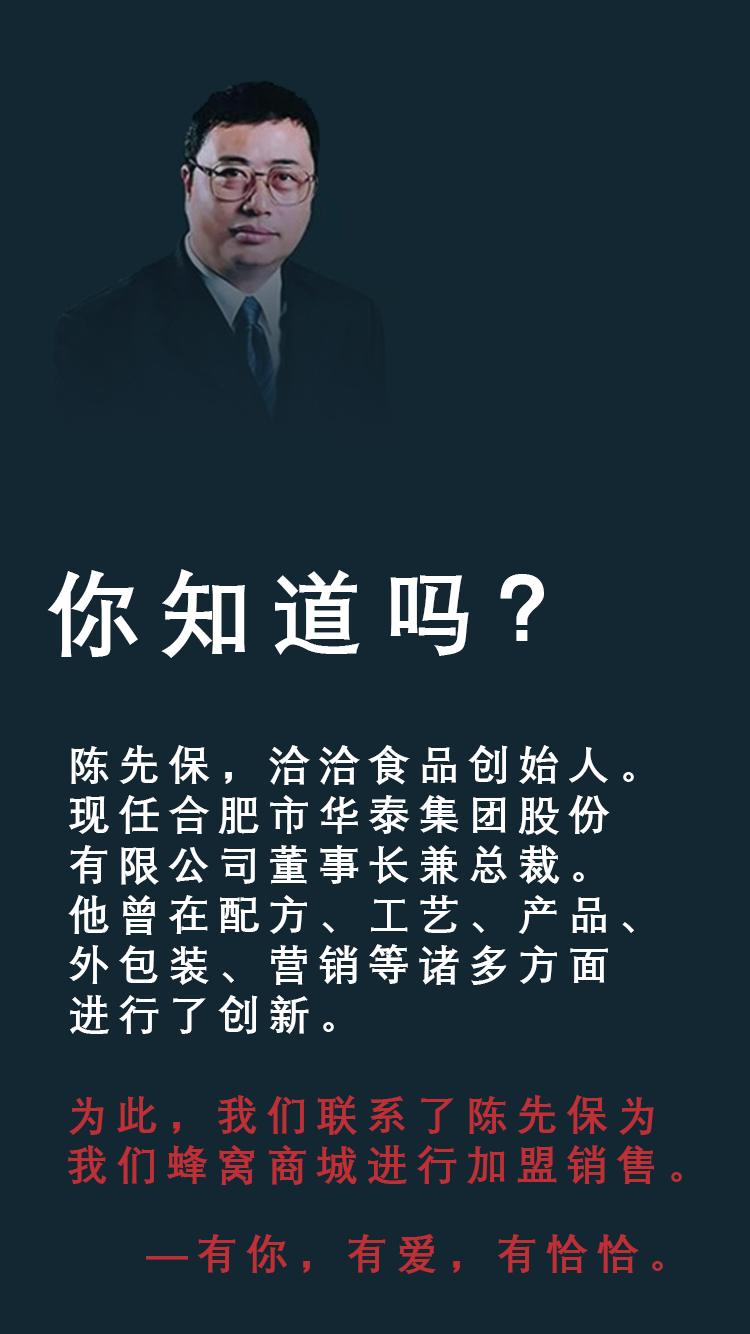
<style>
.page{position:relative;width:750px;height:1334px;background:#132732}
.page>*{position:absolute;margin:0}
.t1{font:93.2px "DengXian-Bold";letter-spacing:0.2em;color:#ffffff}
.t2{font:41.7px "DengXian-Bold";letter-spacing:0.2em;color:#ffffff}
.t3{font:41.7px "DengXian-Bold";letter-spacing:0.2em;color:#be3036}
</style>
<div class="page">
<p class="t1" style="left:47px;top:569px;width:497px;height:89px">你知道吗？</p>
<p class="t2" style="left:68px;top:745px;width:566px;height:289px">陈先保，洽洽食品创始人。<br>现任合肥市华泰集团股份<br>有限公司董事长兼总裁。<br>他曾在配方、工艺、产品、<br>外包装、营销等诸多方面<br>进行了创新。</p>
<p class="t3" style="left:68px;top:1095px;width:614px;height:90px">为此，我们联系了陈先保为<br>我们蜂窝商城进行加盟销售。</p>
<p class="t3" style="left:146px;top:1234px;width:517px;height:40px">—有你，有爱，有恰恰。</p>
</div>
